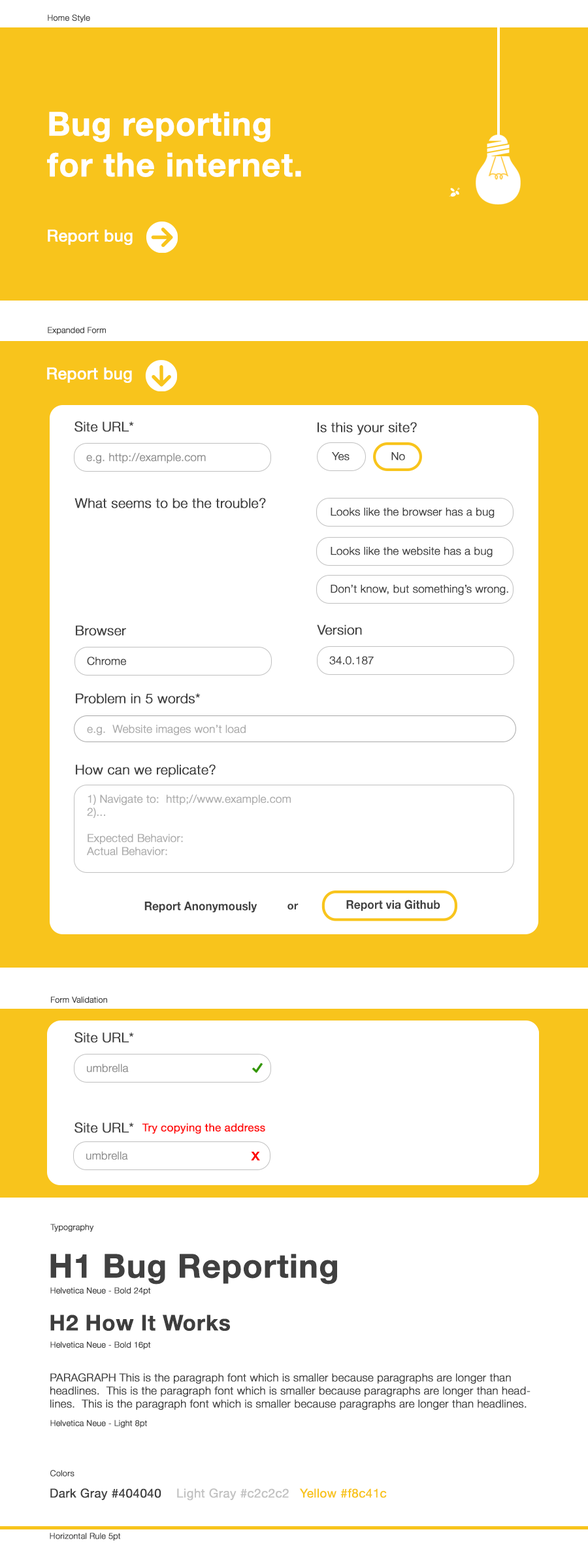
<style>
.page{position:relative;width:588px;height:1568px;background:#ffffff}
.page>*{position:absolute;margin:0}
.t1{font:8.2px "HelveticaNeue-Light";color:#424242;font-weight:bold}
.t2{font:32.7px/40.8px "HelveticaNeue-Bold";color:#ffffff;font-weight:bold}
.t3{font:16.3px "HelveticaNeue";color:#ffffff;font-weight:bold}
.t4{font:13.6px "HelveticaNeue-Light";color:#404040;font-weight:bold}
.t5{font:10.9px "HelveticaNeue-Light";color:#909090;font-weight:bold}
.t6{font:10.9px "HelveticaNeue-Light";color:#404040;font-weight:bold}
.t7{font:10.9px "HelveticaNeue-Light";color:#acacac;font-weight:bold}
.t8{font:12.1px "HelveticaNeue-Bold";color:#404040;scale:0.94 1}
.t9{font:10.9px "HelveticaNeue-Bold";color:#404040}
.t10{font:8.2px "HelveticaNeue-Light";color:#404040;font-weight:bold}
.t11{font:10.9px "HelveticaNeue";color:#ff1212;font-weight:bold}
.t12{font:16.3px "HelveticaNeue";color:#ff0000;font-weight:bold}
.t13{font:32.7px "HelveticaNeue-Bold";color:#404040;font-weight:bold}
.t14{font:21.8px "HelveticaNeue-Bold";color:#3e3e3e;font-weight:bold}
.t15{font:12.2px "HelveticaNeue";color:#404040;font-weight:bold}
.t16{font:12.2px "HelveticaNeue";color:#c2c2c2;font-weight:bold}
.t17{font:12.2px "HelveticaNeue";color:#f8c41c;font-weight:bold}
</style>
<div class="page">
<p class="t1" style="left:48px;top:14px;width:42px;height:9px">Home Style</p>
<p class="t2" style="left:47px;top:112px;width:254px;height:65px">Bug reporting <br>for the internet.</p>
<p class="t3" style="left:48px;top:229px;width:85px;height:16px">Report bug</p>
<p class="t1" style="left:48px;top:327px;width:58px;height:8px">Expanded Form</p>
<p class="t3" style="left:47px;top:367px;width:85px;height:16px">Report bug</p>
<p class="t4" style="left:74px;top:421px;width:60px;height:11px">Site URL*</p>
<p class="t4" style="left:318px;top:422px;width:99px;height:13px">Is this your site?</p>
<p class="t5" style="left:86px;top:453px;width:120px;height:11px">e.g. http://example.com</p>
<p class="t6" style="left:332px;top:452px;width:18px;height:9px">Yes</p>
<p class="t6" style="left:391px;top:452px;width:14px;height:9px">No</p>
<p class="t4" style="left:74px;top:498px;width:192px;height:10px">What seems to be the trouble?</p>
<p class="t6" style="left:331px;top:508px;width:164px;height:10px">Looks like the browser has a bug</p>
<p class="t6" style="left:331px;top:547px;width:162px;height:10px">Looks like the website has a bug</p>
<p class="t6" style="left:331px;top:585px;width:177px;height:10px">Don’t know, but something’s wrong.</p>
<p class="t4" style="left:76px;top:625px;width:50px;height:11px">Browser</p>
<p class="t4" style="left:317px;top:625px;width:45px;height:10px">Version</p>
<p class="t6" style="left:87px;top:657px;width:39px;height:8px">Chrome</p>
<p class="t6" style="left:329px;top:656px;width:45px;height:8px">34.0.187</p>
<p class="t4" style="left:76px;top:693px;width:125px;height:11px">Problem in 5 words*</p>
<p class="t7" style="left:87px;top:725px;width:159px;height:11px">e.g.  Website images won’t load</p>
<p class="t4" style="left:76px;top:764px;width:140px;height:13px">How can we replicate?</p>
<p class="t7" style="left:87px;top:794px;width:204px;height:61px">1) Navigate to:  http;//www.example.com<br>2)...<br><br>Expected Behavior:<br>Actual Behavior:</p>
<p class="t8" style="left:144px;top:902px;width:113px;height:11px">Report Anonymously</p>
<p class="t9" style="left:287px;top:904px;width:12px;height:6px">or</p>
<p class="t8" style="left:346px;top:900px;width:94px;height:11px">Report via Github</p>
<p class="t10" style="left:51px;top:996px;width:56px;height:7px">Form Validation</p>
<p class="t4" style="left:74px;top:1032px;width:60px;height:11px">Site URL*</p>
<p class="t5" style="left:87px;top:1064px;width:42px;height:8px">umbrella</p>
<p class="t4" style="left:74px;top:1122px;width:60px;height:11px">Site URL*</p>
<p class="t11" style="left:142px;top:1123px;width:123px;height:11px">Try copying the address</p>
<p class="t5" style="left:86px;top:1151px;width:42px;height:9px">umbrella</p>
<p class="t12" style="left:251px;top:1151px;width:9px;height:10px">x</p>
<p class="t1" style="left:50px;top:1224px;width:44px;height:8px">Typography</p>
<p class="t13" style="left:50px;top:1254px;width:287px;height:30px">H1 Bug Reporting</p>
<p class="t10" style="left:50px;top:1287px;width:101px;height:9px">Helvetica Neue - Bold 24pt</p>
<p class="t14" style="left:50px;top:1315px;width:180px;height:16px">H2 How It Works</p>
<p class="t10" style="left:50px;top:1341px;width:101px;height:9px">Helvetica Neue - Bold 16pt</p>
<p class="t6" style="left:50px;top:1373px;width:481px;height:37px"><span class="t10"><br><br></span>PARAGRAPH This is the paragraph font which is smaller because paragraphs are longer than headlines.  This is the paragraph font which is smaller because paragraphs are longer than headlines.  This is the paragraph font which is smaller because paragraphs are longer than headlines.</p>
<p class="t10" style="left:50px;top:1420px;width:97px;height:8px">Helvetica Neue - Light 8pt</p>
<p class="t1" style="left:50px;top:1470px;width:24px;height:7px">Colors</p>
<p class="t15" style="left:50px;top:1488px;width:111px;height:12px">Dark Gray #404040</p>
<p class="t16" style="left:177px;top:1488px;width:112px;height:13px">Light Gray #c2c2c2</p>
<p class="t17" style="left:299px;top:1488px;width:88px;height:10px">Yellow #f8c41c</p>
<p class="t1" style="left:50px;top:1533px;width:71px;height:8px">Horizontal Rule 5pt</p>
</div>
